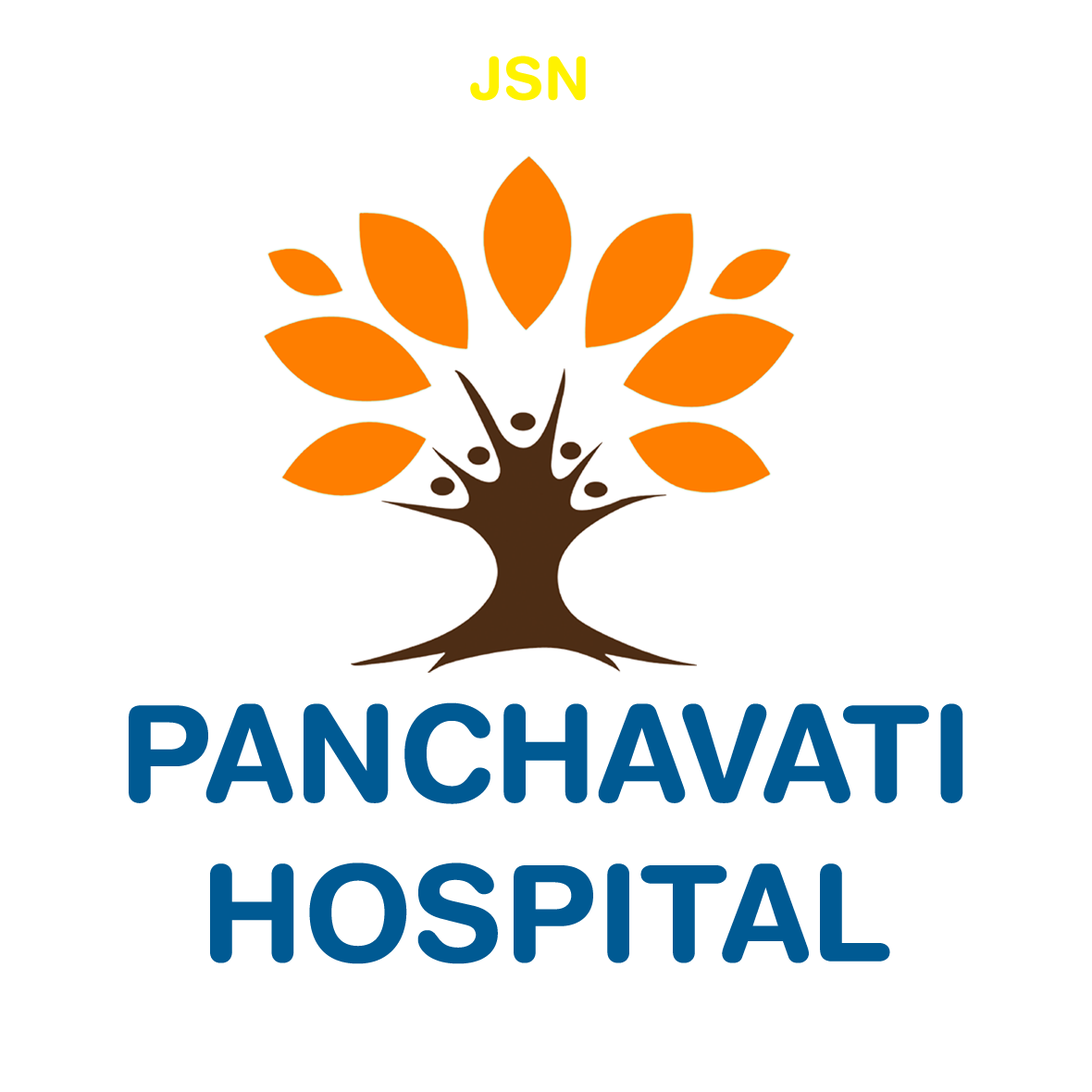
<style>
.page{position:relative;width:1092px;height:1092px;background:#ffffff}
.page>*{position:absolute;margin:0}
.t1{font:59.1px "HelveticaRounded-Bold";color:#fff200}
.t2{font:133.2px "HelveticaRounded-Bold";color:#005a93}
</style>
<div class="page">
<p class="t1" style="left:470px;top:56px;width:116px;height:45px">JSN</p>
<p class="t2" style="left:129px;top:702px;width:834px;height:262px;text-align:center">PANCHAVATI <br>HOSPITAL</p>
</div>
